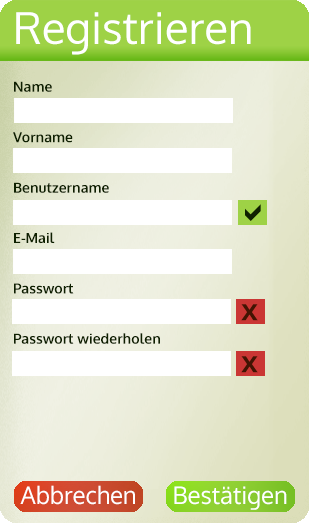
<style>
.page{position:relative;width:310px;height:523px;background:#ffffff}
.page>*{position:absolute;margin:0}
.t1{font:44px "Oxygen-Regular";color:#ffffff}
.t2{font:14px "Oxygen-Bold";color:#0e2000}
.t3{font:24px "Oxygen-Regular";color:#ffffff}
</style>
<div class="page">
<p class="t1" style="left:16px;top:12px;width:235px;height:43px">Registrieren</p>
<p class="t2" style="left:13px;top:81px;width:147px;height:263px">Name<br><br><br>Vorname<br><br><br>Benutzername<br><br><br>E-Mail<br><br><br>Passwort<br><br><br>Passwort wiederholen</p>
<p class="t3" style="left:20px;top:485px;width:115px;height:20px">Abbrechen</p>
<p class="t3" style="left:174px;top:486px;width:113px;height:24px">Bestätigen</p>
</div>
